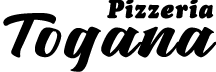
<style>
.page{position:relative;width:216px;height:72px;background:#ffffff}
.page>*{position:absolute;margin:0}
.t1{font:25.5px "CooperBlackStd-Italic";letter-spacing:0.04em;color:#000000;scale:0.94 1}
.t2{font:61.9px "RosalindaRegular";letter-spacing:0.04em;color:#000000;scale:1.33 1}
</style>
<div class="page">
<p class="t1" style="left:107px;top:0px;width:107px;height:19px">Pizzeria</p>
<p class="t2" style="left:3px;top:13px;width:214px;height:59px">Togana</p>
</div>
